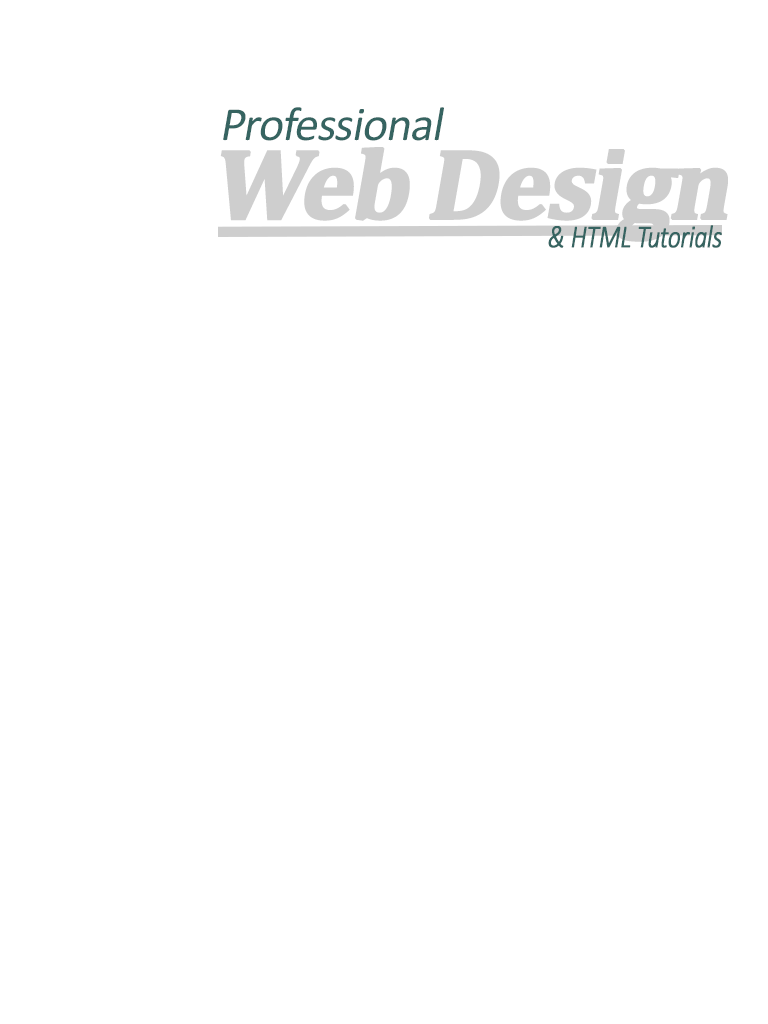
<style>
.page{position:relative;width:768px;height:1024px;background:#ffffff}
.page>*{position:absolute;margin:0}
.t1{font:48px "Calibri";letter-spacing:-0.025em;color:#366461;font-style:italic}
.t2{font:100px "Cambria-Bold";letter-spacing:-0.05em;color:#cecece;font-weight:bold;font-style:italic}
.t3{font:32px "Calibri-LightItalic";letter-spacing:-0.025em;color:#366461;font-weight:bold;scale:0.8 1}
</style>
<div class="page">
<p class="t1" style="left:223px;top:107px;width:221px;height:34px">Professional</p>
<p class="t2" style="left:220px;top:147px;width:508px;height:95px">Web Design</p>
<p class="t3" style="left:548px;top:225px;width:174px;height:23px">&amp; HTML Tutorials</p>
</div>
